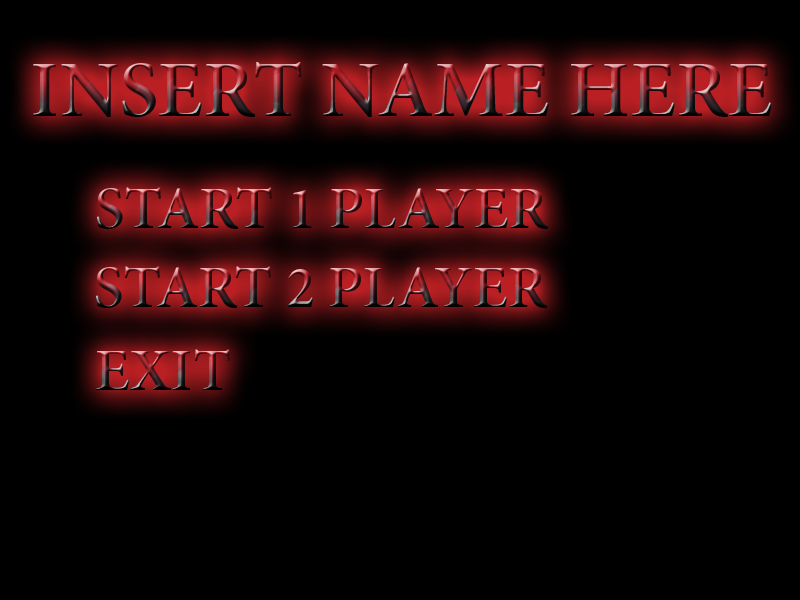
<style>
.page{position:relative;width:800px;height:600px;background:#000000}
.page>*{position:absolute;margin:0}
.t1{font:80px "MinionPro-Semibold"}
.t2{font:60px "MinionPro-Semibold"}
</style>
<div class="page">
<p class="t1" style="left:33px;top:62px;width:739px;height:55px">INSERT NAME HERE</p>
<p class="t2" style="left:97px;top:187px;width:451px;height:42px">START 1 PLAYER</p>
<p class="t2" style="left:96px;top:266px;width:451px;height:42px">START 2 PLAYER</p>
<p class="t2" style="left:96px;top:349px;width:134px;height:41px">EXIT</p>
</div>
